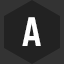
<style>
.page{position:relative;width:64px;height:64px;background:#222222}
.page>*{position:absolute;margin:0}
.t1{font:36px "Norwester-Regular";color:#ffffff}
</style>
<div class="page">
<p class="t1" style="left:22px;top:17px;width:19px;height:29px">A</p>
</div>
